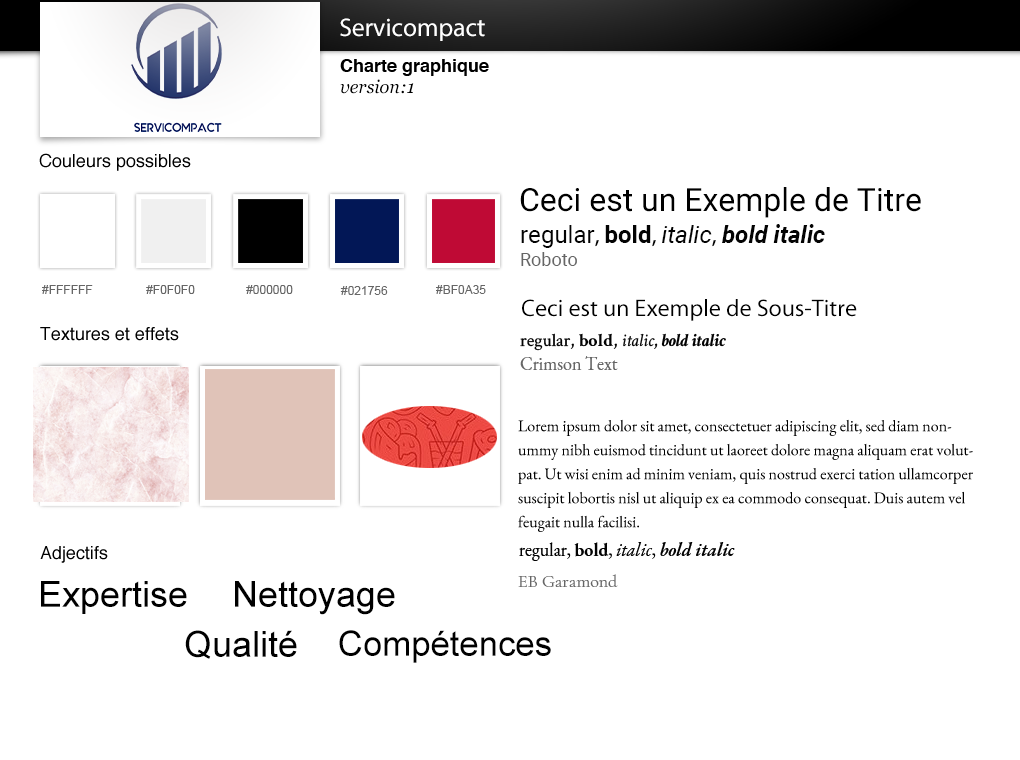
<style>
.page{position:relative;width:1020px;height:760px;background:#ffffff}
.page>*{position:absolute;margin:0}
.t1{font:25.7px "MyriadPro-Regular";color:#ffffff}
.t2{font:18px "Helvetica-Bold";color:#000000}
.t3{font:18px "Georgia-Italic";color:#000000}
.t4{font:18px "Helvetica";color:#000000}
.t5{font:32px "Roboto-Regular";color:#000000}
.t6{font:24px "Roboto-BoldItalic";color:#030303}
.t7{font:24px "Roboto-Regular";color:#030303}
.t8{font:24px "MyriadPro-Regular";color:#030303}
.t9{font:24px "Roboto-Bold";color:#030303}
.t10{font:24px "Roboto-Italic";color:#030303}
.t11{font:18px "Roboto-Regular";color:#666666}
.t12{font:12px "ArialMT";color:#666666}
.t13{font:24px "MyriadPro-Regular";color:#000000}
.t14{font:18px "CrimsonText-BoldItalic";color:#030303}
.t15{font:18px "CrimsonText-Regular";color:#030303}
.t16{font:18px "CrimsonText-Bold";color:#030303}
.t17{font:18px "CrimsonText-Italic";color:#030303}
.t18{font:18px "EBGaramond-Regular";color:#666666}
.t19{font:16px/24px "EBGaramond-Regular";color:#000000}
.t20{font:18px "EBGaramond-SemiBoldItalic";color:#030303}
.t21{font:18px "EBGaramond-Regular";color:#030303}
.t22{font:18px "EBGaramond-Bold";color:#030303}
.t23{font:18px "EBGaramond-Italic";color:#030303}
.t24{font:36px "ArialMT";color:#000000}
.t25{font:18px "CormorantGaramond-Regular";color:#666666}
.t26{font:34.7px "ArialMT";color:#000000}
</style>
<div class="page">
<p class="t1" style="left:340px;top:18px;width:145px;height:23px">Servicompact</p>
<p class="t2" style="left:340px;top:59px;width:149px;height:17px">Charte graphique</p>
<p class="t3" style="left:340px;top:79px;width:74px;height:15px">version:1</p>
<p class="t4" style="left:39px;top:153px;width:152px;height:18px">Couleurs possibles</p>
<p class="t5" style="left:520px;top:187px;width:401px;height:31px">Ceci est un Exemple de Titre</p>
<p class="t6" style="left:521px;top:224px;width:304px;height:24px"><span class="t7">regular</span><span class="t8">, </span><span class="t9">bold</span><span class="t8">, </span><span class="t10">italic</span><span class="t8">, </span>bold italic</p>
<p class="t11" style="left:521px;top:252px;width:56px;height:14px">Roboto</p>
<p class="t12" style="left:42px;top:285px;width:51px;height:9px">#FFFFFF</p>
<p class="t12" style="left:146px;top:285px;width:49px;height:9px">#F0F0F0</p>
<p class="t12" style="left:246px;top:285px;width:47px;height:9px">#000000</p>
<p class="t12" style="left:340px;top:286px;width:48px;height:9px">#021756</p>
<p class="t12" style="left:436px;top:285px;width:50px;height:9px">#BF0A35</p>
<p class="t13" style="left:522px;top:299px;width:335px;height:22px">Ceci est un Exemple de Sous-Titre</p>
<p class="t4" style="left:40px;top:327px;width:139px;height:14px">Textures et effets</p>
<p class="t14" style="left:520px;top:333px;width:206px;height:18px"><span class="t15">regular, </span><span class="t16">bold</span><span class="t15">, </span><span class="t17">italic</span><span class="t15">, </span>bold italic</p>
<p class="t18" style="left:520px;top:356px;width:98px;height:14px">Crimson Text</p>
<p class="t19" style="left:518px;top:419px;width:455px;height:113px">Lorem ipsum dolor sit amet, consectetuer adipiscing elit, sed diam nonummy nibh euismod tincidunt ut laoreet dolore magna aliquam erat volutpat. Ut wisi enim ad minim veniam, quis nostrud exerci tation ullamcorper suscipit lobortis nisl ut aliquip ex ea commodo consequat. Duis autem vel feugait nulla facilisi.</p>
<p class="t20" style="left:519px;top:542px;width:216px;height:19px"><span class="t21">regular, </span><span class="t22">bold</span><span class="t21">, </span><span class="t23">italic</span><span class="t21">, </span>bold italic</p>
<p class="t4" style="left:40px;top:546px;width:68px;height:17px">Adjectifs</p>
<p class="t24" style="left:41px;top:581px;width:146px;height:33px">Expertise</p>
<p class="t24" style="left:235px;top:581px;width:160px;height:34px">Nettoyage</p>
<p class="t25" style="left:518px;top:574px;width:100px;height:13px">EB Garamond</p>
<p class="t24" style="left:185px;top:630px;width:112px;height:29px">Qualité</p>
<p class="t26" style="left:339px;top:630px;width:212px;height:33px">Compétences</p>
</div>
